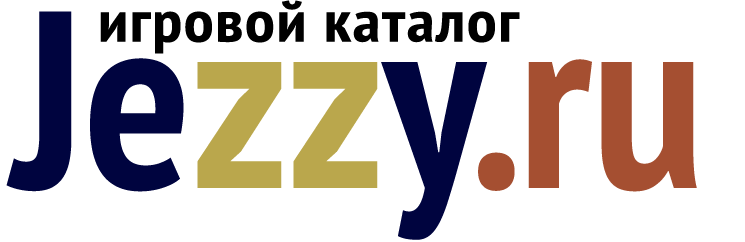
<style>
.page{position:relative;width:745px;height:242px;background:#ffffff}
.page>*{position:absolute;margin:0}
.t1{font:58.4px "PTSans-NarrowBold";letter-spacing:0.025em;color:#000000;scale:1.15 1}
.t2{font:252px "PTSans-NarrowBold";color:#a54f31}
.t3{font:252px "PTSans-NarrowBold";color:#00043f}
.t4{font:252px "PTSans-NarrowBold";color:#baa74c}
</style>
<div class="page">
<p class="t1" style="left:100px;top:0px;width:420px;height:54px">игровой каталог</p>
<p class="t2" style="left:6px;top:11px;width:691px;height:229px"><span class="t3">Je</span><span class="t4">zz</span><span class="t3">y</span>.ru</p>
</div>
